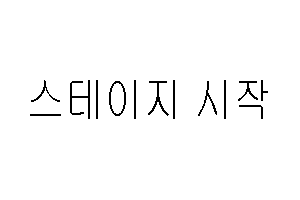
<style>
.page{position:relative;width:300px;height:200px;background:#ffffff}
.page>*{position:absolute;margin:0}
.t1{font:48.7px "Gulim";color:#000000;scale:0.8 1}
</style>
<div class="page">
<p class="t1" style="left:30px;top:80px;width:238px;height:39px">스테이지 시작</p>
</div>
